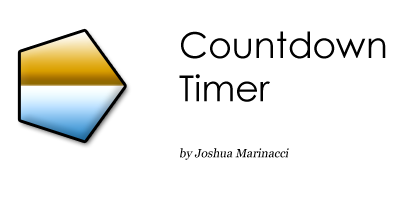
<style>
.page{position:relative;width:408px;height:200px;background:#ffffff}
.page>*{position:absolute;margin:0}
.t1{font:12px/56px "Georgia";color:#000000;font-style:italic}
.t2{font:36px "CenturyGothic";color:#000000}
</style>
<div class="page">
<p class="t1" style="left:179px;top:31px;width:207px;height:129px"><span class="t2">Countdown<br>Timer<br></span>by Joshua Marinacci</p>
</div>
